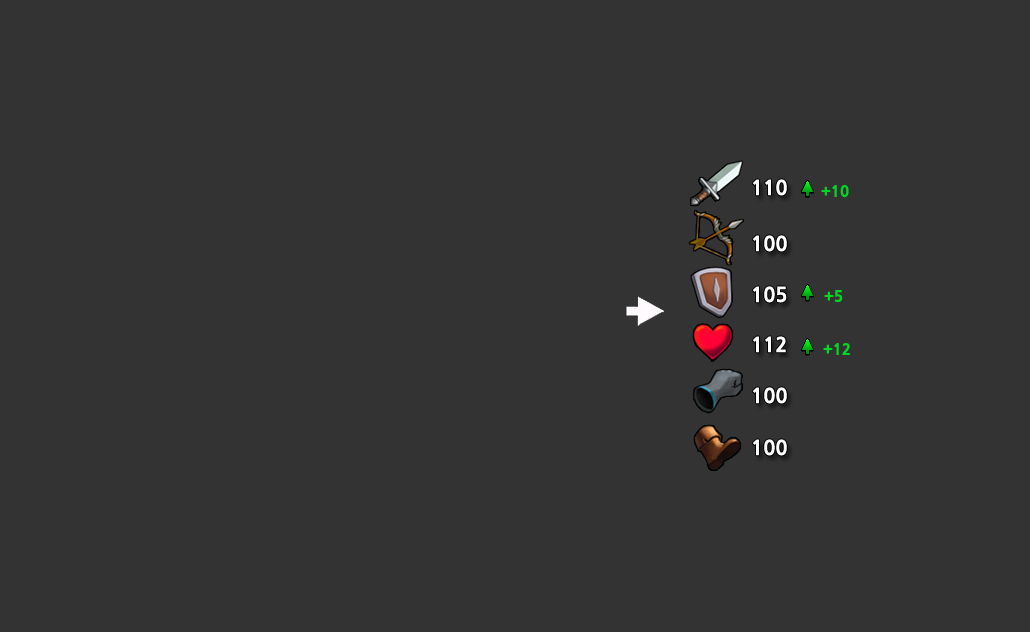
<style>
.page{position:relative;width:1030px;height:632px;background:#333333}
.page>*{position:absolute;margin:0}
.t1{font:20px "NanumGothicExtraBold";color:#ffffff}
.t2{font:15px "NanumGothicExtraBold";color:#00d824}
</style>
<div class="page">
<p class="t1" style="left:753px;top:179px;width:34px;height:17px">110</p>
<p class="t2" style="left:821px;top:185px;width:28px;height:13px">+10</p>
<p class="t1" style="left:753px;top:235px;width:34px;height:17px">100</p>
<p class="t1" style="left:753px;top:286px;width:34px;height:17px">105</p>
<p class="t2" style="left:824px;top:290px;width:19px;height:12px">+5</p>
<p class="t1" style="left:753px;top:336px;width:33px;height:17px">112</p>
<p class="t2" style="left:823px;top:343px;width:27px;height:12px">+12</p>
<p class="t1" style="left:753px;top:387px;width:34px;height:17px">100</p>
<p class="t1" style="left:753px;top:439px;width:34px;height:17px">100</p>
</div>
